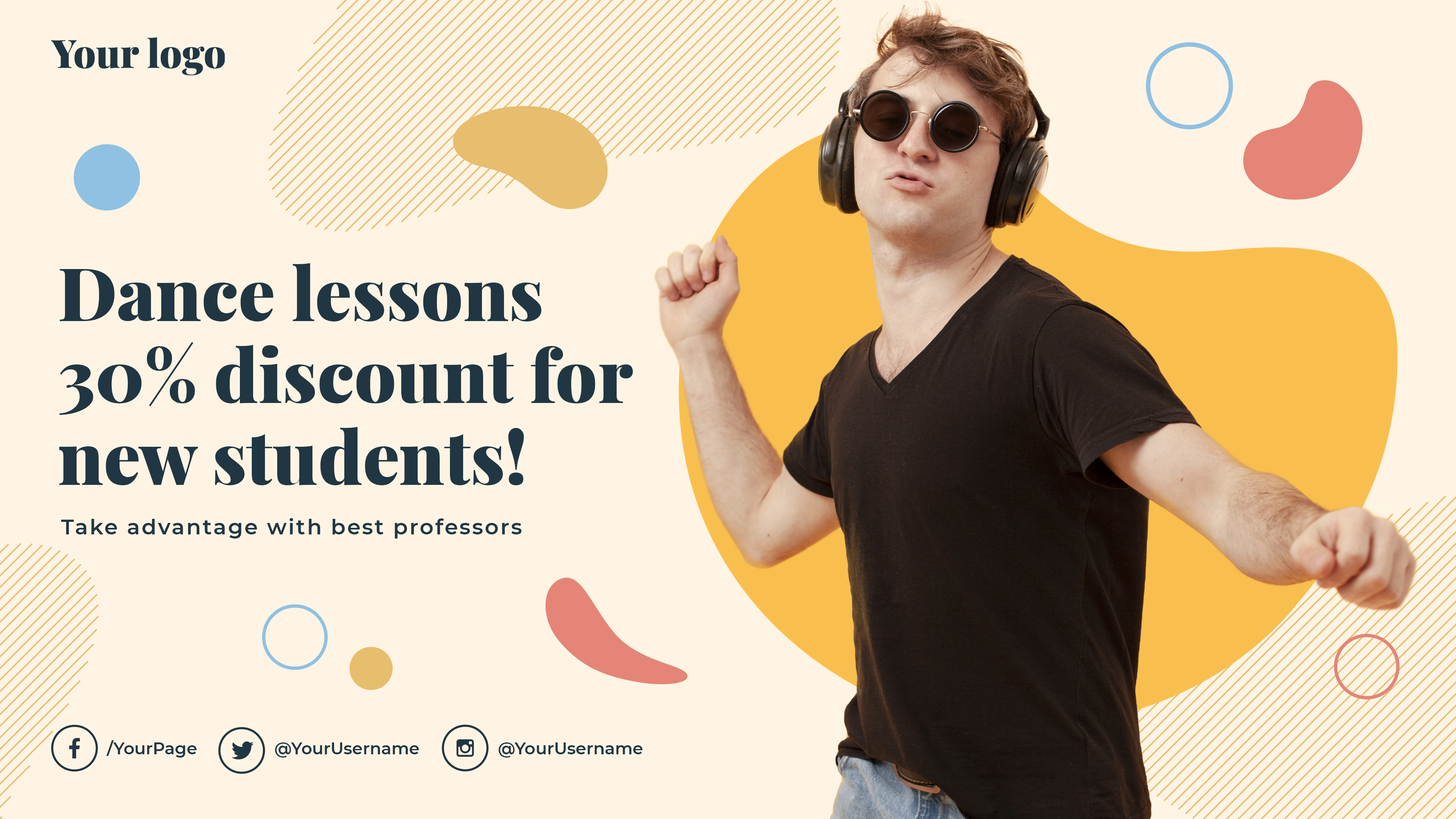
<style>
.page{position:relative;width:1456px;height:819px;background:#fff4e4}
.page>*{position:absolute;margin:0}
.t1{font:73.4px/81.9px "PlayfairDisplay-Black";color:#203642}
.t2{font:21.5px "Montserrat-SemiBold";letter-spacing:0.075em;color:#203642}
.t3{font:16.8px "Montserrat-SemiBold";color:#203642}
</style>
<div class="page">
<p class="t1" style="left:59px;top:263px;width:574px;height:222px">Dance lessons<br>30% discount for <br>new students!</p>
<p class="t2" style="left:61px;top:518px;width:461px;height:20px">Take advantage with best professors</p>
<p class="t3" style="left:106px;top:740px;width:91px;height:18px">/YourPage</p>
<p class="t3" style="left:275px;top:742px;width:144px;height:16px">@YourUsername</p>
<p class="t3" style="left:498px;top:742px;width:144px;height:16px">@YourUsername</p>
</div>
